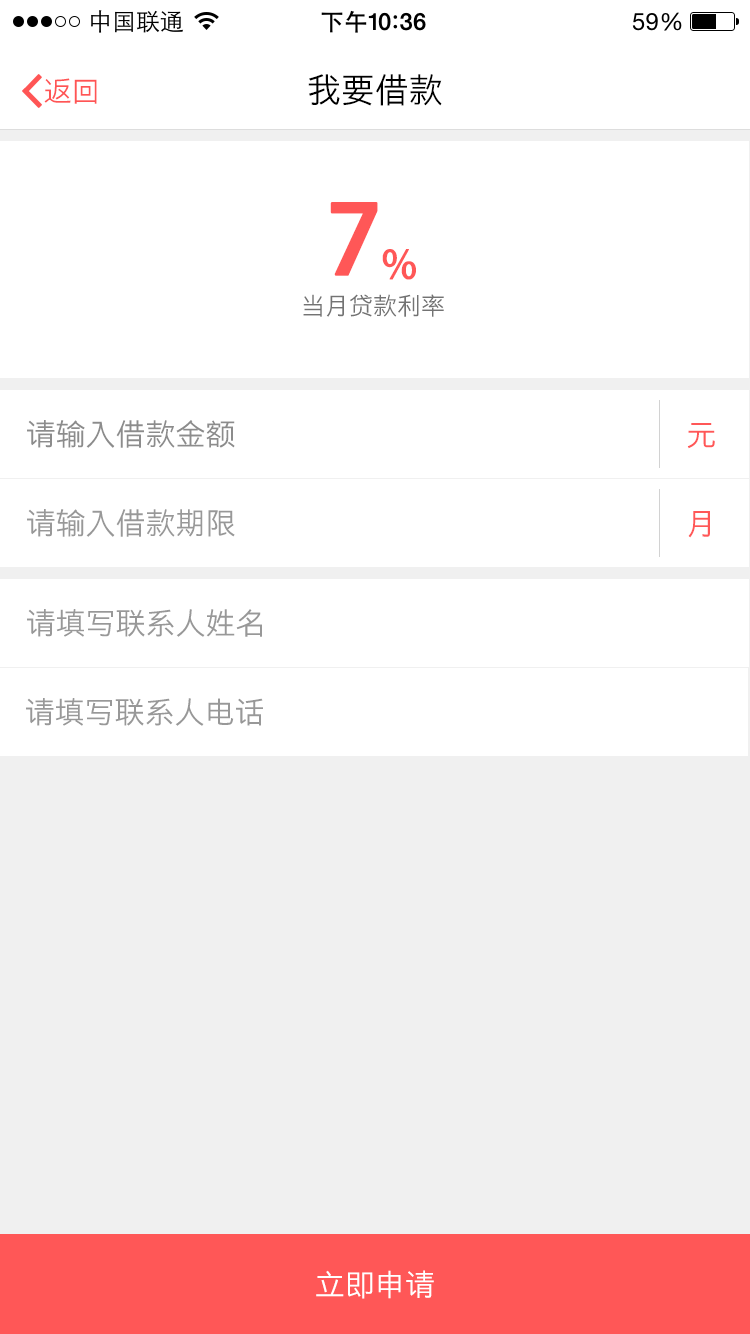
<style>
.page{position:relative;width:750px;height:1334px;background:#ffffff}
.page>*{position:absolute;margin:0}
.t1{font:28px "STHeitiSC-Light";color:#ff5555}
.t2{font:34px "STHeitiSC-Light";color:#000000}
.t3{font:120px "STHeitiSC-Medium";color:#ff5757}
.t4{font:48px "STHeitiSC-Medium";color:#ff5757}
.t5{font:24px "STHeitiSC-Light";color:#737373}
.t6{font:30px "STHeitiSC-Light";color:#8c8c8c}
.t7{font:30px "STHeitiSC-Light";color:#ff5757}
.t8{font:30px "STHeitiSC-Light";color:#989898}
.t9{font:30px "STHeitiSC-Light";color:#ffffff}
</style>
<div class="page">
<p class="t1" style="left:44px;top:78px;width:53px;height:26px">返回</p>
<p class="t2" style="left:308px;top:74px;width:134px;height:32px">我要借款</p>
<p class="t3" style="left:330px;top:202px;width:86px;height:78px">7<span class="t4">%</span></p>
<p class="t5" style="left:303px;top:294px;width:141px;height:23px">当月贷款利率</p>
<p class="t6" style="left:27px;top:420px;width:208px;height:28px">请输入借款金额</p>
<p class="t7" style="left:687px;top:423px;width:28px;height:26px">元</p>
<p class="t8" style="left:27px;top:509px;width:208px;height:28px">请输入借款期限</p>
<p class="t7" style="left:688px;top:511px;width:22px;height:27px">月</p>
<p class="t8" style="left:27px;top:609px;width:235px;height:28px">请填写联系人姓名</p>
<p class="t8" style="left:26px;top:698px;width:237px;height:28px">请填写联系人电话</p>
<p class="t9" style="left:316px;top:1270px;width:118px;height:29px">立即申请</p>
</div>
